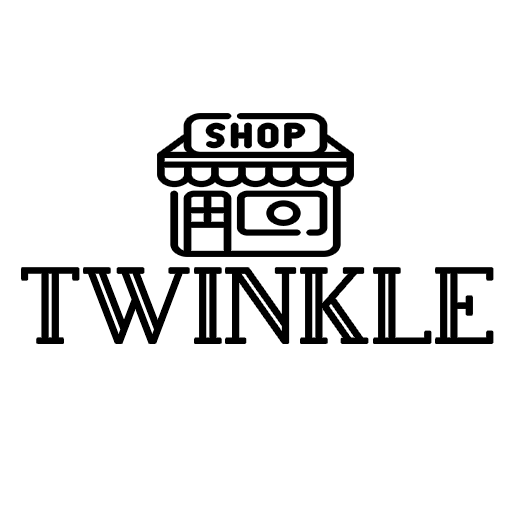
<style>
.page{position:relative;width:512px;height:512px;background:#ffffff}
.page>*{position:absolute;margin:0}
.t1{font:102.3px "Rollfast";color:#000000;scale:1.13 1}
</style>
<div class="page">
<p class="t1" style="left:22px;top:268px;width:471px;height:75px">Twinkle</p>
</div>
